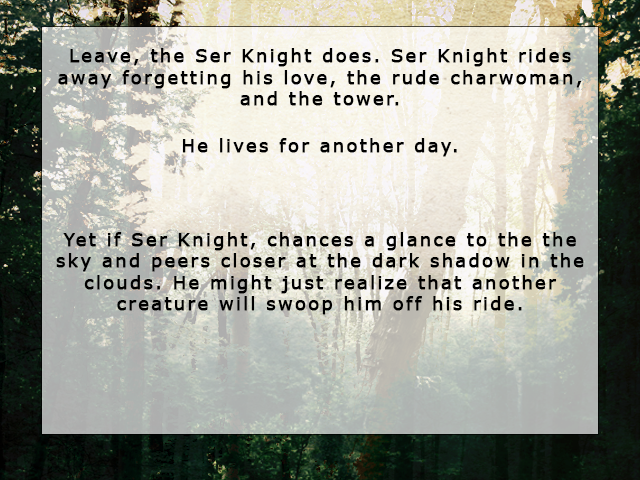
<style>
.page{position:relative;width:640px;height:480px}
.page>*{position:absolute;margin:0}
.t1{font:18px "Verdana";letter-spacing:0.1em;color:#000000;font-weight:bold}
</style>
<div class="page">
<p class="t1" style="left:56px;top:48px;width:528px;height:267px;text-align:center">Leave, the Ser Knight does. Ser Knight rides away forgetting his love, the rude charwoman, and the tower.<br><br>He lives for another day.<br><br><br><br>Yet if Ser Knight, chances a glance to the the sky and peers closer at the dark shadow in the clouds. He might just realize that another creature will swoop him off his ride.</p>
</div>
